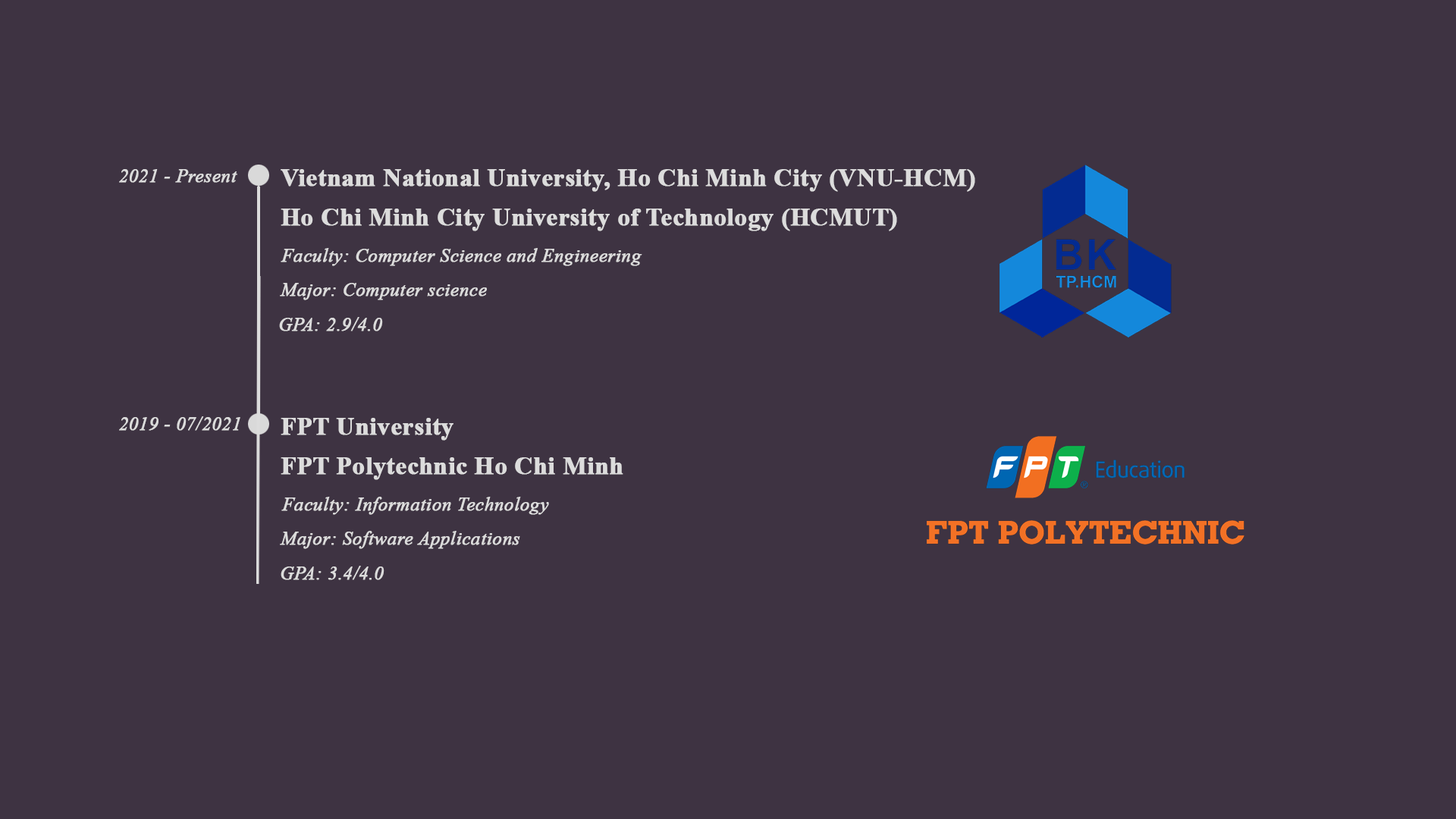
<style>
.page{position:relative;width:1456px;height:819px;background:#3e3342}
.page>*{position:absolute;margin:0}
.t1{font:19px "TimesNewRomanPS-ItalicMT";color:#dcdcdc;font-weight:bold}
.t2{font:25px "TimesNewRomanPS-BoldMT";color:#dcdcdc;font-weight:bold}
</style>
<div class="page">
<p class="t1" style="left:119px;top:169px;width:118px;height:14px">2021 - Present</p>
<p class="t2" style="left:281px;top:169px;width:694px;height:23px">Vietnam National University, Ho Chi Minh City (VNU-HCM)</p>
<p class="t2" style="left:281px;top:209px;width:616px;height:22px">Ho Chi Minh City University of Technology (HCMUT)</p>
<p class="t1" style="left:281px;top:248px;width:361px;height:18px">Faculty: Computer Science and Engineering</p>
<p class="t1" style="left:280px;top:283px;width:207px;height:17px">Major: Computer science</p>
<p class="t1" style="left:279px;top:317px;width:104px;height:14px">GPA: 2.9/4.0</p>
<p class="t1" style="left:119px;top:416px;width:121px;height:15px">2019 - 07/2021</p>
<p class="t2" style="left:281px;top:418px;width:172px;height:23px">FPT University</p>
<p class="t2" style="left:281px;top:457px;width:342px;height:23px">FPT Polytechnic Ho Chi Minh</p>
<p class="t1" style="left:281px;top:497px;width:268px;height:18px">Faculty: Information Technology</p>
<p class="t1" style="left:280px;top:531px;width:240px;height:18px">Major: Software Applications</p>
<p class="t1" style="left:281px;top:566px;width:103px;height:14px">GPA: 3.4/4.0</p>
</div>
